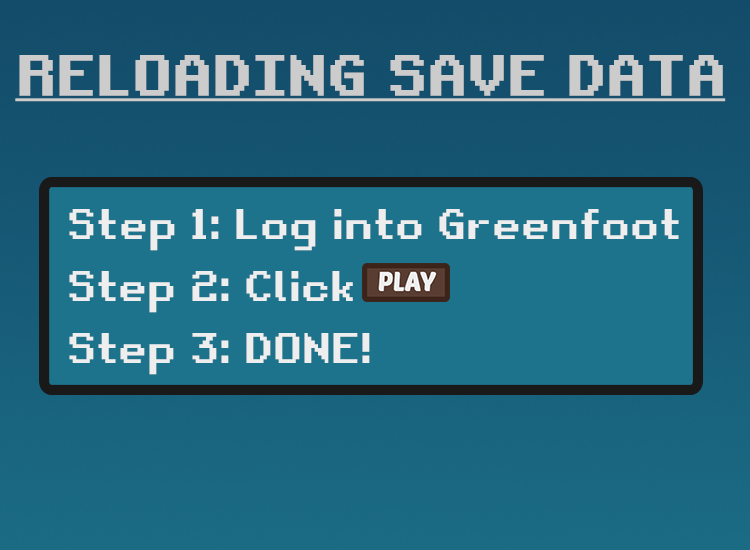
<style>
.page{position:relative;width:750px;height:550px;background:#1d738c}
.page>*{position:absolute;margin:0}
.t1{font:55px "RetroGaming";color:#cccccc;font-weight:bold;text-decoration:underline;scale:0.91 1}
.t2{font:41.2px "RetroGaming";color:#eeeeee;scale:0.91 1}
</style>
<div class="page">
<p class="t1" style="left:15px;top:55px;width:711px;height:47px">RELOADING SAVE DATA</p>
<p class="t2" style="left:69px;top:209px;width:610px;height:42px">Step 1: Log into Greenfoot</p>
<p class="t2" style="left:69px;top:271px;width:284px;height:42px">Step 2: Click</p>
<p class="t2" style="left:69px;top:333px;width:301px;height:42px">Step 3: DONE!</p>
</div>
